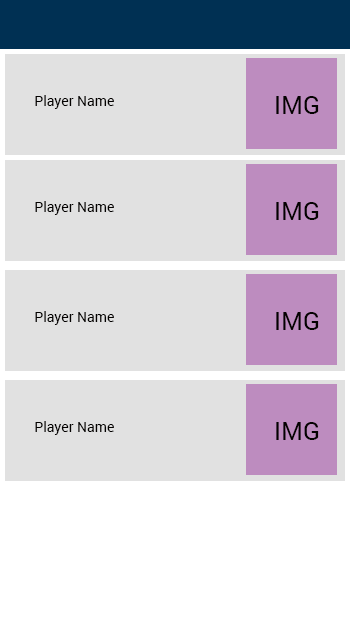
<style>
.page{position:relative;width:350px;height:624px;background:#e1e1e1}
.page>*{position:absolute;margin:0}
.t1{font:14px "Roboto-Regular";color:#040201}
.t2{font:25px "Roboto-Regular";color:#040201}
</style>
<div class="page">
<p class="t1" style="left:35px;top:95px;width:79px;height:14px">Player Name</p>
<p class="t2" style="left:276px;top:96px;width:43px;height:18px">IMG</p>
<p class="t1" style="left:35px;top:201px;width:79px;height:14px">Player Name</p>
<p class="t2" style="left:276px;top:202px;width:43px;height:18px">IMG</p>
<p class="t1" style="left:35px;top:311px;width:79px;height:14px">Player Name</p>
<p class="t2" style="left:276px;top:312px;width:43px;height:18px">IMG</p>
<p class="t1" style="left:35px;top:421px;width:79px;height:14px">Player Name</p>
<p class="t2" style="left:276px;top:422px;width:43px;height:18px">IMG</p>
</div>
